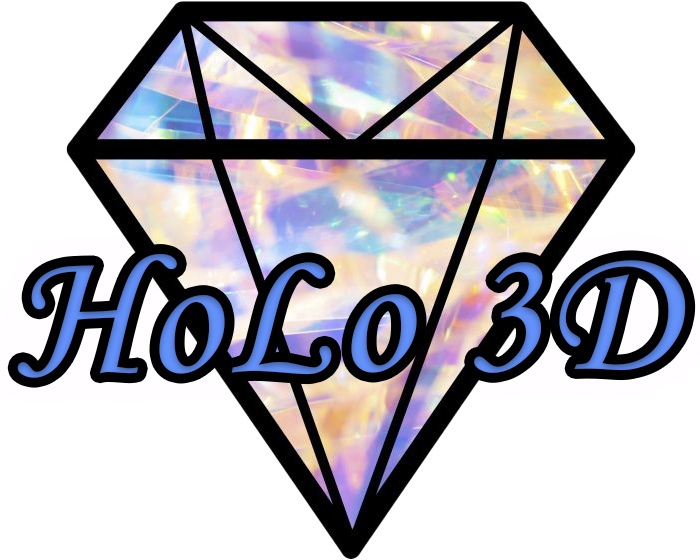
<style>
.page{position:relative;width:700px;height:560px;background:#ffffff}
.page>*{position:absolute;margin:0}
.t1{font:184px "MonotypeCorsiva";letter-spacing:0.03em;color:#5c87e8}
</style>
<div class="page">
<p class="t1" style="left:17px;top:254px;width:669px;height:124px">HoLo 3D</p>
</div>
